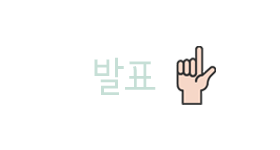
<style>
.page{position:relative;width:280px;height:150px;background:#ffffff}
.page>*{position:absolute;margin:0}
.t1{font:40px "SeN-CM";color:#c6dfd6}
</style>
<div class="page">
<p class="t1" style="left:94px;top:57px;width:62px;height:38px">발표</p>
</div>
